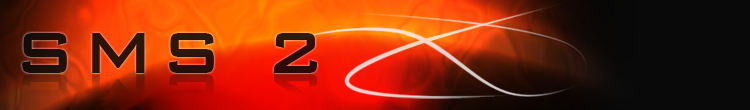
<style>
.page{position:relative;width:750px;height:110px}
.page>*{position:absolute;margin:0}
.t1{font:77.9px "BankGothicBT-Medium";letter-spacing:0.075em;color:#2d1008}
</style>
<div class="page">
<p class="t1" style="left:22px;top:33px;width:295px;height:40px">SMS 2</p>
</div>
